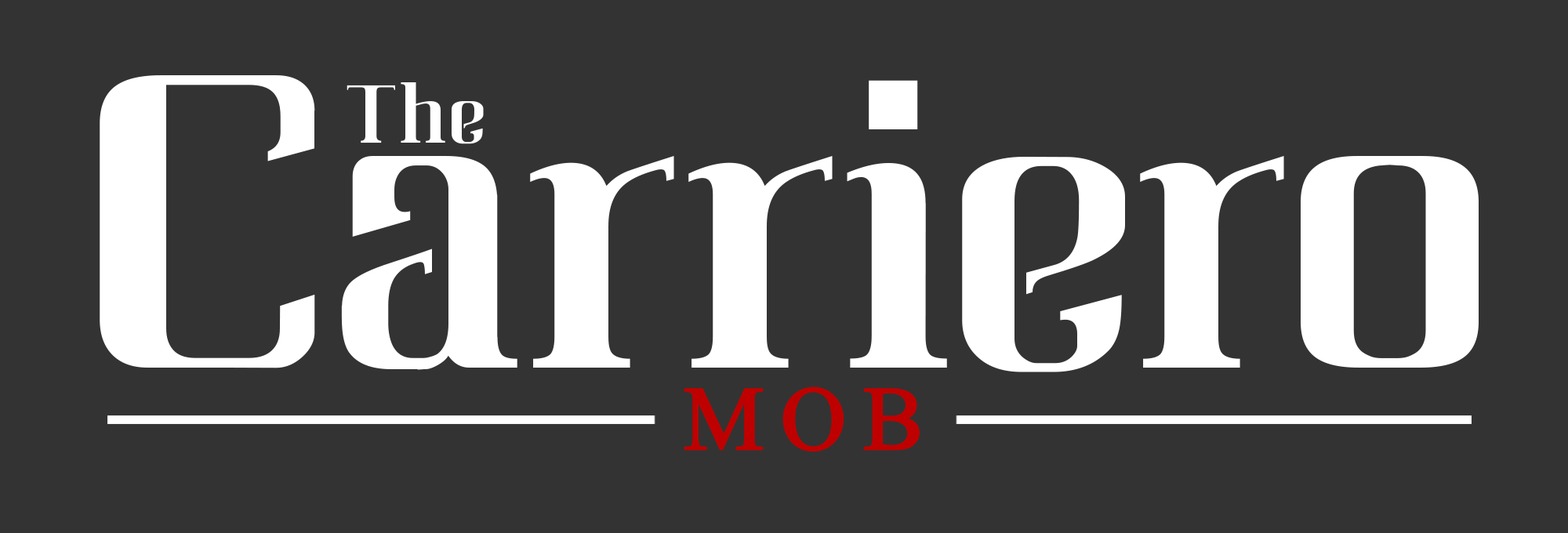
<style>
.page{position:relative;width:1568px;height:533px;background:#333333}
.page>*{position:absolute;margin:0}
.t1{font:403.9px "NOhCarbone";color:#ffffff}
.t2{font:78.5px "NOhCarbone";letter-spacing:0.05em;color:#ffffff}
.t3{font:134.6px "Microsoft-Himalaya";letter-spacing:0.1em;color:#bf0000;font-weight:bold}
</style>
<div class="page">
<p class="t1" style="left:100px;top:75px;width:1379px;height:297px">Carriero</p>
<p class="t2" style="left:347px;top:82px;width:137px;height:62px">The</p>
<p class="t3" style="left:684px;top:387px;width:236px;height:65px">MOB</p>
</div>
